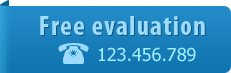
<style>
.page{position:relative;width:231px;height:73px}
.page>*{position:absolute;margin:0}
.t1{font:28px "MyriadPro-BoldCond";letter-spacing:0.04em;color:#9cdbfc}
.t2{font:18px "Tahoma";color:#9cdbfc}
</style>
<div class="page">
<p class="t1" style="left:40px;top:16px;width:165px;height:19px">Free evaluation</p>
<p class="t2" style="left:99px;top:47px;width:97px;height:15px">123.456.789</p>
</div>
